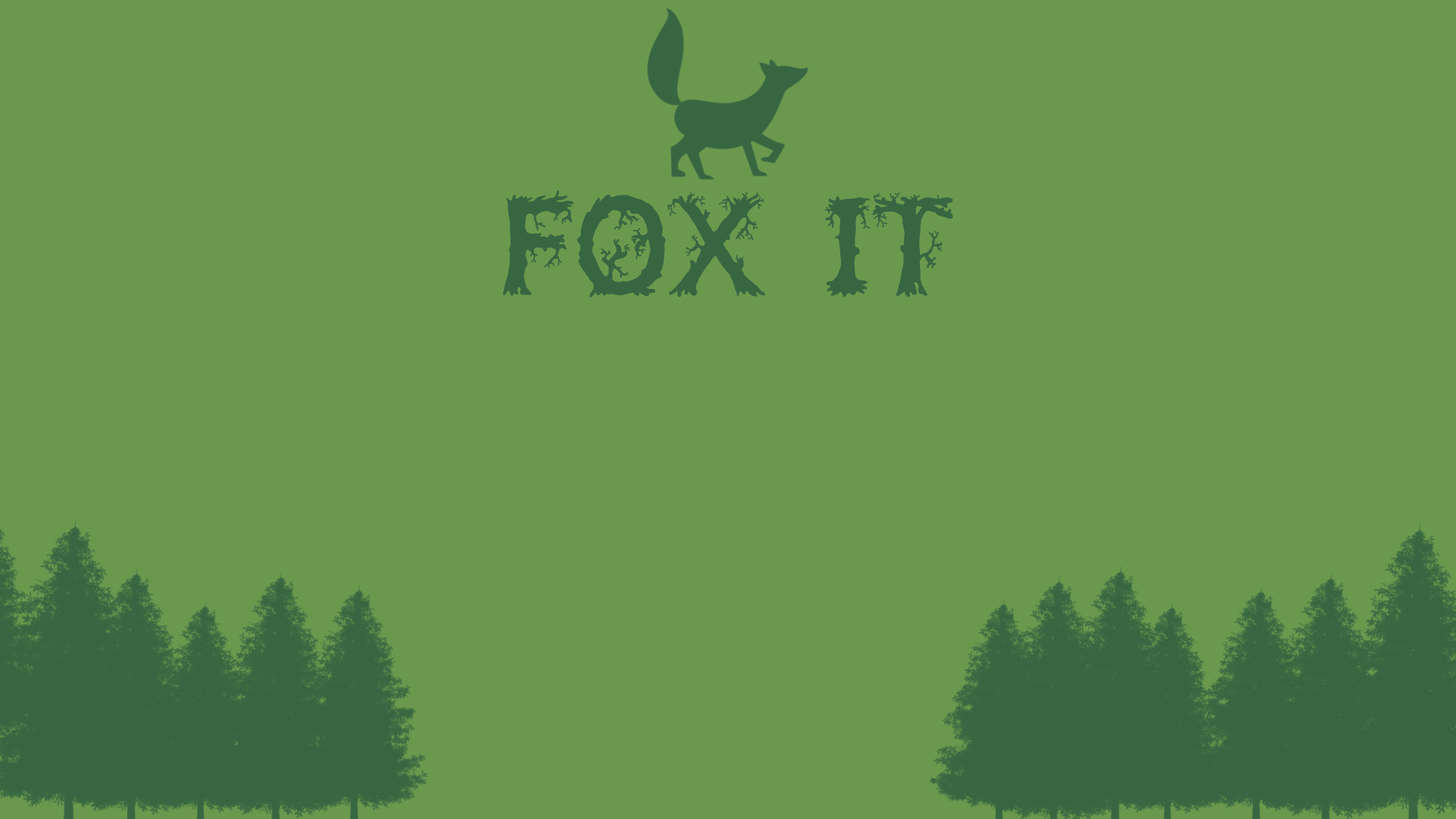
<style>
.page{position:relative;width:1456px;height:819px;background:#6a994e}
.page>*{position:absolute;margin:0}
.t1{font:113.7px "JFWildWood";color:#386641}
</style>
<div class="page">
<p class="t1" style="left:503px;top:190px;width:450px;height:108px">FOX IT</p>
</div>
